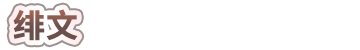
<style>
.page{position:relative;width:360px;height:50px;background:#ffffff}
.page>*{position:absolute;margin:0}
.t1{font:32px "SourceHanSansSC-Bold";color:#73534d;font-weight:bold}
</style>
<div class="page">
<p class="t1" style="left:13px;top:9px;width:65px;height:32px">绯文</p>
</div>
